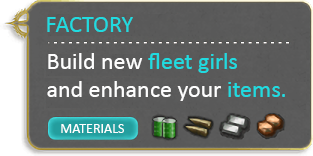
<style>
.page{position:relative;width:313px;height:156px}
.page>*{position:absolute;margin:0}
.t1{font:24px "Calibri";color:#20dbe0}
.t2{font:24px "Calibri";color:#fefefe}
.t3{font:14px "Calibri";color:#ffffff}
</style>
<div class="page">
<p class="t1" style="left:47px;top:17px;width:86px;height:15px">FACTORY</p>
<p class="t2" style="left:47px;top:53px;width:238px;height:48px">Build new <span class="t1">fleet girls</span> <br>and enhance your <span class="t1">items.</span></p>
<p class="t3" style="left:61px;top:124px;width:63px;height:9px">MATERIALS</p>
</div>
